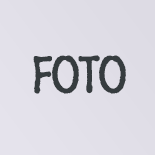
<style>
.page{position:relative;width:155px;height:155px}
.page>*{position:absolute;margin:0}
.t1{font:52.7px "SegoeMarker";letter-spacing:-0.03em;color:#363c3f}
</style>
<div class="page">
<p class="t1" style="left:33px;top:55px;width:93px;height:39px">FOTO</p>
</div>
